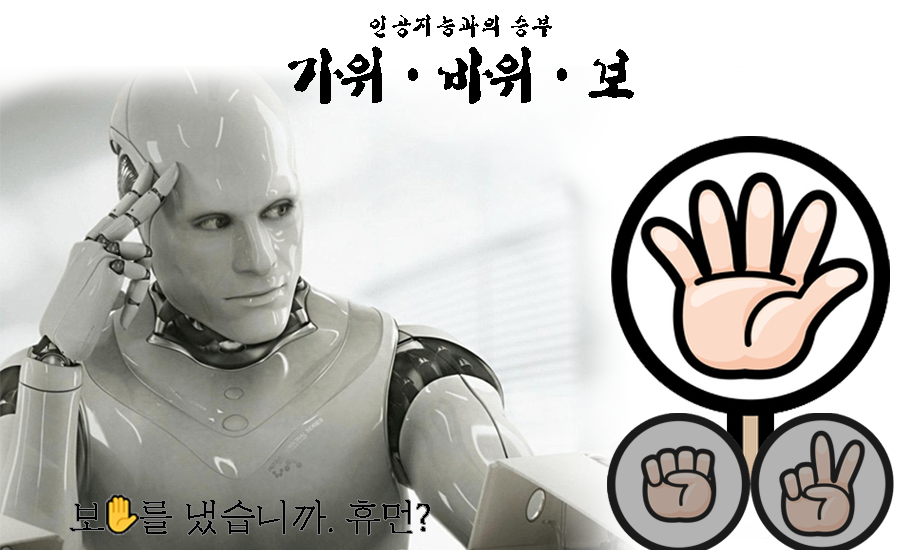
<style>
.page{position:relative;width:900px;height:550px;background:#ffffff}
.page>*{position:absolute;margin:0}
.t1{font:25px "HYbsrB";letter-spacing:-0.1em;color:#000000}
.t2{font:61.6px "HYbsrB";letter-spacing:-0.2em;color:#000000}
.t3{font:37.3px "Yj-DWMMOOGJO-Medium";letter-spacing:-0.075em;color:#000000}
</style>
<div class="page">
<p class="t1" style="left:370px;top:14px;width:182px;height:24px">인공지능과의 승부</p>
<p class="t2" style="left:288px;top:46px;width:346px;height:58px">가위ㆍ바위ㆍ보</p>
<p class="t3" style="left:70px;top:499px;width:360px;height:36px">보   를 냈습니까. 휴먼?</p>
</div>
